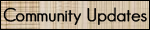
<style>
.page{position:relative;width:150px;height:30px}
.page>*{position:absolute;margin:0}
.t1{font:18px "GeosansLight";color:#000000;font-weight:bold}
</style>
<div class="page">
<p class="t1" style="left:3px;top:7px;width:144px;height:18px">Community Updates</p>
</div>
